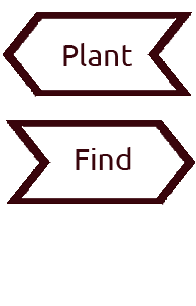
<style>
.page{position:relative;width:196px;height:306px;background:#ffffff}
.page>*{position:absolute;margin:0}
.t1{font:30px "Ubuntu";color:#39050c}
</style>
<div class="page">
<p class="t1" style="left:63px;top:43px;width:69px;height:23px">Plant</p>
<p class="t1" style="left:76px;top:147px;width:55px;height:23px">Find</p>
</div>
